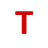
<style>
.page{position:relative;width:48px;height:48px;background:#ffffff}
.page>*{position:absolute;margin:0}
.t1{font:36px "Calibri-Bold";color:#cd0808}
.t2{font:14px "Calibri-Bold";color:#ffffff}
</style>
<div class="page">
<p class="t1" style="left:15px;top:11px;width:18px;height:23px"><span class="t2">     </span>T</p>
</div>
